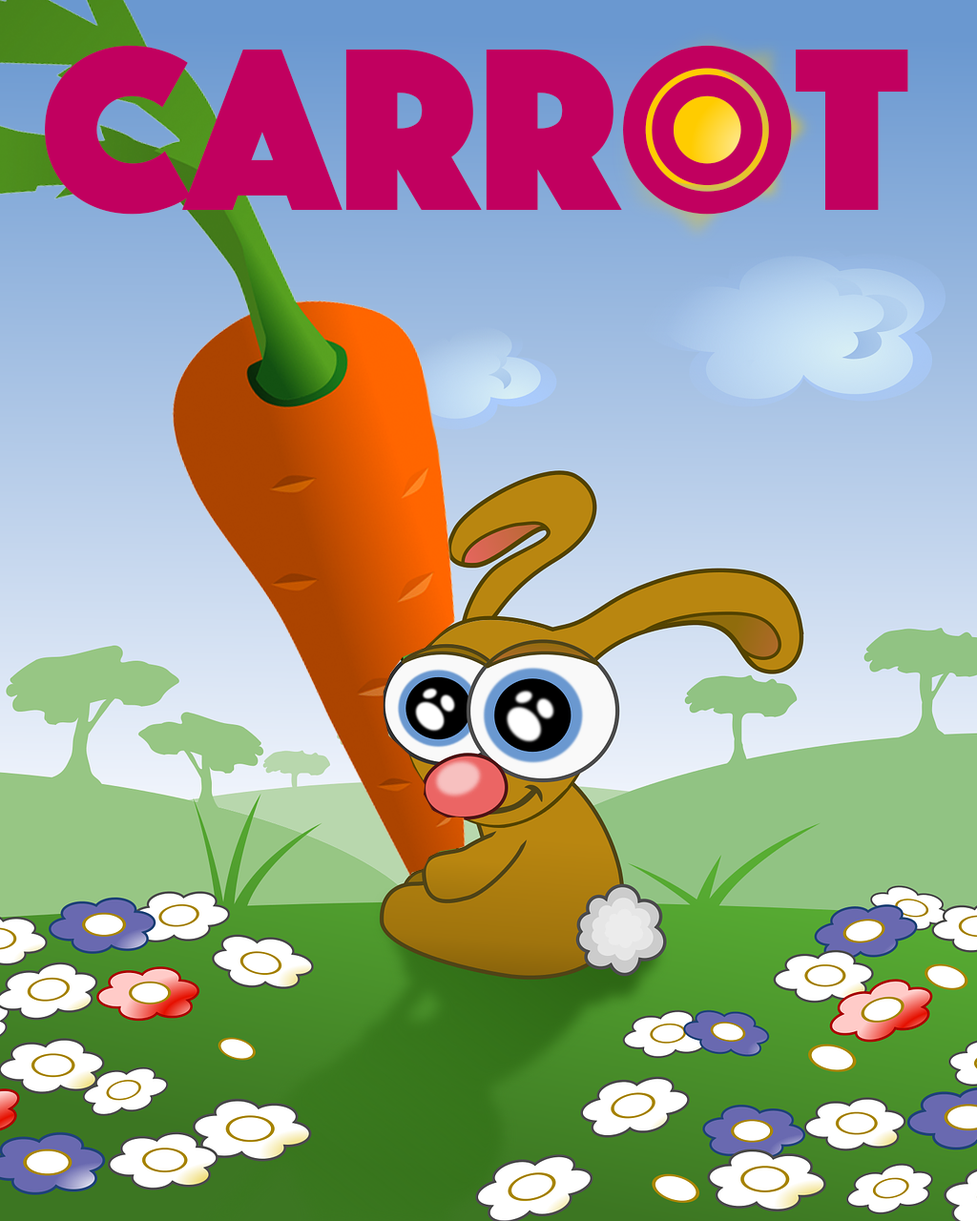
<style>
.page{position:relative;width:977px;height:1221px}
.page>*{position:absolute;margin:0}
.t1{font:240.4px "Phosphate-Solid";color:#c1005f}
.t2{font:240.4px "Phosphate-Inline";color:#c1005f}
</style>
<div class="page">
<p class="t1" style="left:45px;top:45px;width:863px;height:170px">carr<span class="t2">o</span>t</p>
</div>
